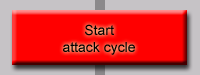
<style>
.page{position:relative;width:200px;height:75px;background:#ff0000}
.page>*{position:absolute;margin:0}
.t1{font:14px "ArialMT";color:#000000}
</style>
<div class="page">
<p class="t1" style="left:63px;top:24px;width:72px;height:31px;text-align:center">Start<br>attack cycle</p>
</div>
